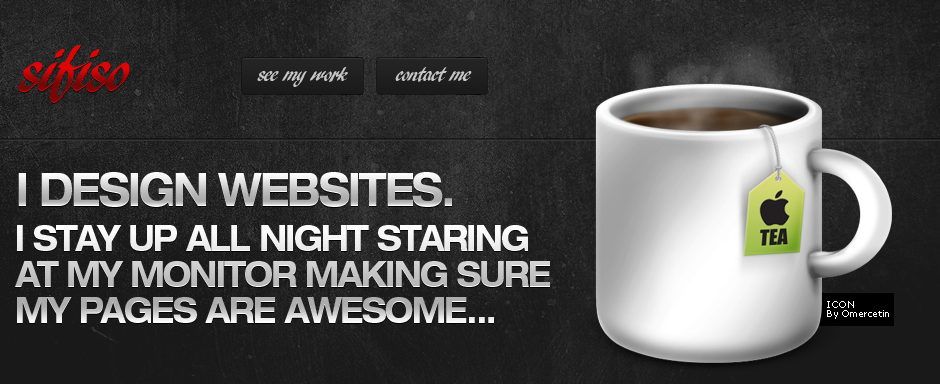
<style>
.page{position:relative;width:940px;height:384px}
.page>*{position:absolute;margin:0}
.t1{font:60px "ARBLANCA";letter-spacing:-0.05em}
.t2{font:20px "ARBLANCA";letter-spacing:-0.05em;color:#c7c7c7}
.t3{font:45.6px "HelveticaNeueLTStd-BdEx";letter-spacing:-0.05em;text-transform:uppercase;scale:0.83 1}
.t4{font:36px/36px "HelveticaNeueLTStd-BdEx";letter-spacing:-0.05em;text-transform:uppercase;scale:0.83 1}
.t5{font:9px/9px "Verdana";letter-spacing:-0.05em;color:#fefefe}
</style>
<div class="page">
<p class="t1" style="left:18px;top:45px;width:112px;height:58px">sifiso</p>
<p class="t1" style="left:18px;top:45px;width:112px;height:58px">sifiso</p>
<p class="t2" style="left:257px;top:67px;width:215px;height:20px">see my work        contact me</p>
<p class="t3" style="left:18px;top:172px;width:434px;height:35px">i design websites.</p>
<p class="t4" style="left:15px;top:225px;width:535px;height:98px">i stay up all night staring<br>at my monitor making sure<br>my pages are awesome...</p>
<p class="t5" style="left:827px;top:301px;width:62px;height:18px">ICON<br>By Omercetin</p>
</div>
